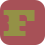
<style>
.page{position:relative;width:45px;height:45px;background:#a75157}
.page>*{position:absolute;margin:0}
.t1{font:50px "Saddlebag-Black";color:#949146}
</style>
<div class="page">
<p class="t1" style="left:3px;top:10px;width:32px;height:26px">F</p>
</div>
